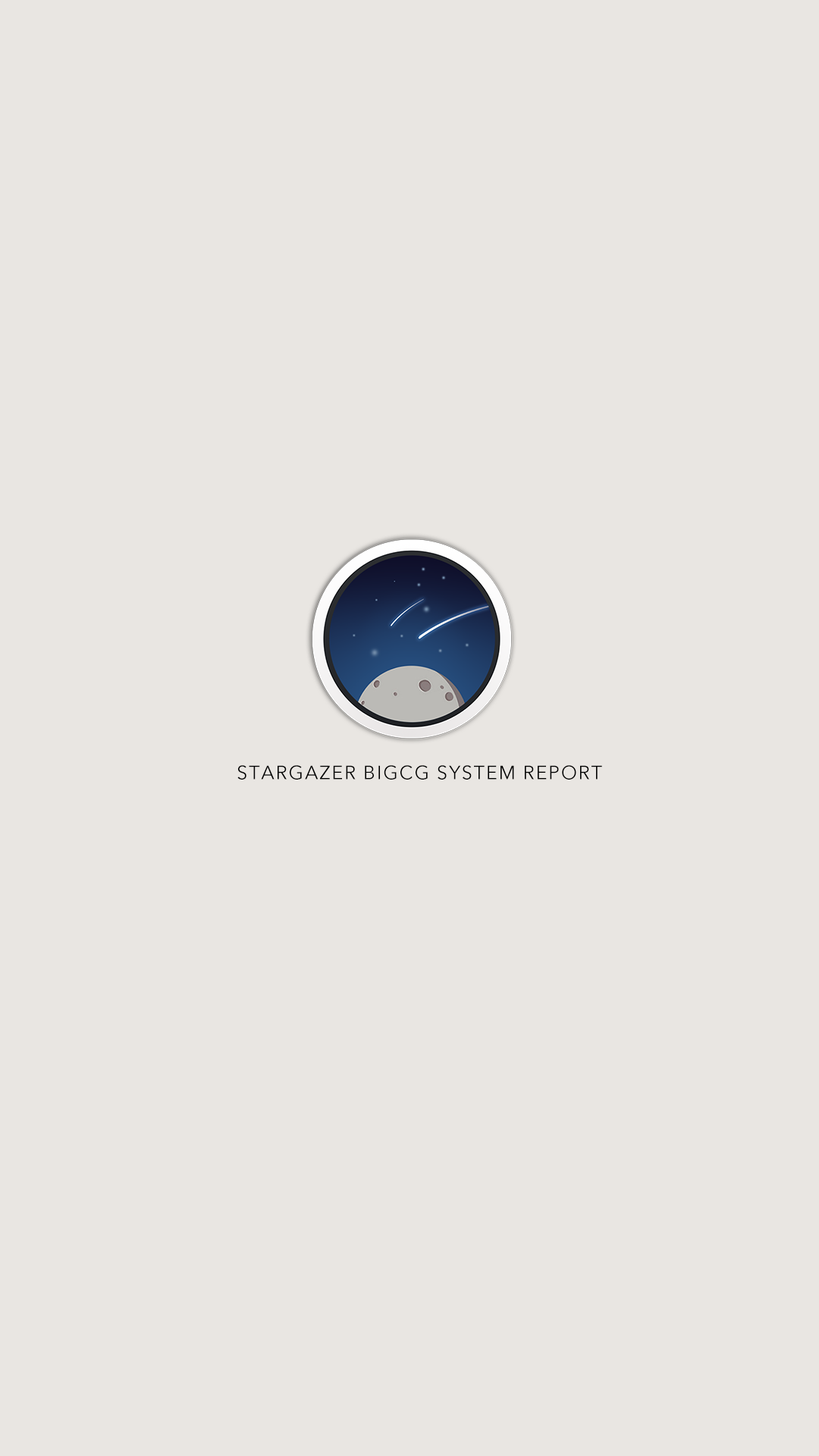
<style>
.page{position:relative;width:819px;height:1456px;background:#e9e6e2}
.page>*{position:absolute;margin:0}
.t1{font:19px "AvenirNext-Regular";letter-spacing:0.075em;color:#000000}
</style>
<div class="page">
<p class="t1" style="left:237px;top:765px;width:365px;height:15px">STARGAZER BIGCG SYSTEM REPORT</p>
</div>
